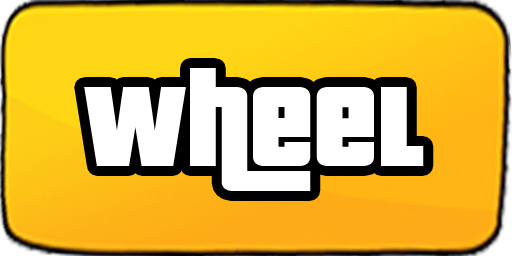
<style>
.page{position:relative;width:512px;height:256px}
.page>*{position:absolute;margin:0}
.t1{font:123.5px "PricedownBl-Regular";letter-spacing:0.012em;color:#ffffff}
</style>
<div class="page">
<p class="t1" style="left:84px;top:68px;width:340px;height:123px">Wheel</p>
</div>
